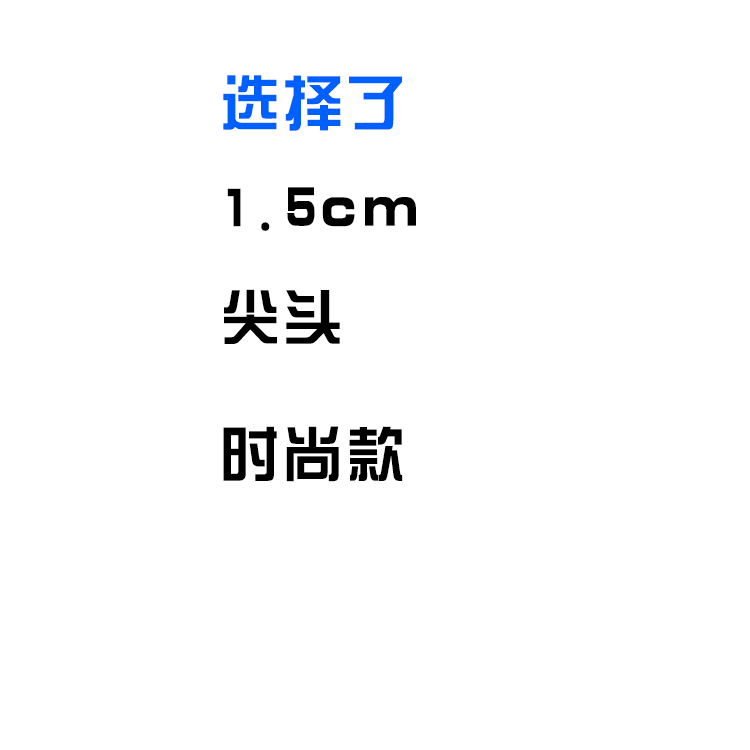
<style>
.page{position:relative;width:750px;height:750px;background:#ffffff}
.page>*{position:absolute;margin:0}
.t1{font:60px "ç»å¸ç»¼èºä½ç®-regular";letter-spacing:0.05em;color:#0060fe}
.t2{font:60px "ç»å¸ç»¼èºä½ç®-regular";letter-spacing:0.05em;color:#000000}
</style>
<div class="page">
<p class="t1" style="left:223px;top:75px;width:179px;height:56px">选择了</p>
<p class="t2" style="left:227px;top:187px;width:189px;height:44px">1.5cm</p>
<p class="t2" style="left:224px;top:289px;width:116px;height:55px">尖头</p>
<p class="t2" style="left:223px;top:426px;width:180px;height:56px">时尚款</p>
</div>
